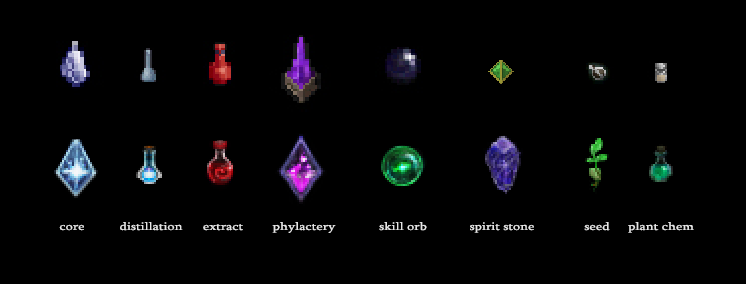
<style>
.page{position:relative;width:746px;height:284px;background:#000000}
.page>*{position:absolute;margin:0}
.t1{font:11.2px "Sylfaen";color:#e5e5e5;scale:1.25 1}
</style>
<div class="page">
<p class="t1" style="left:120px;top:222px;width:63px;height:9px">distillation</p>
<p class="t1" style="left:272px;top:222px;width:64px;height:11px">phylactery</p>
<p class="t1" style="left:379px;top:222px;width:48px;height:9px">skill orb</p>
<p class="t1" style="left:470px;top:222px;width:64px;height:11px">spirit stone</p>
<p class="t1" style="left:584px;top:222px;width:26px;height:9px">seed</p>
<p class="t1" style="left:628px;top:222px;width:66px;height:11px">plant chem</p>
<p class="t1" style="left:59px;top:224px;width:25px;height:7px">core</p>
<p class="t1" style="left:203px;top:224px;width:40px;height:7px">extract</p>
</div>
